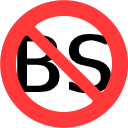
<style>
.page{position:relative;width:128px;height:128px;background:#ffffff}
.page>*{position:absolute;margin:0}
.t1{font:78px "DejaVuSans";color:#000000;font-weight:bold}
</style>
<div class="page">
<p class="t1" style="left:17px;top:34px;width:94px;height:60px">BS</p>
</div>
